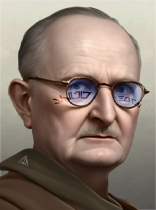
<style>
.page{position:relative;width:156px;height:210px}
.page>*{position:absolute;margin:0}
.t1{font:9.7px "Aurebesh"}
.t2{font:6.1px "Aurebesh"}
</style>
<div class="page">
<p class="t1" style="left:52px;top:91px;width:40px;height:13px;rotate:-10deg">slug</p>
<p class="t2" style="left:118px;top:96px;width:24px;height:12px;rotate:20deg">HORN</p>
</div>
